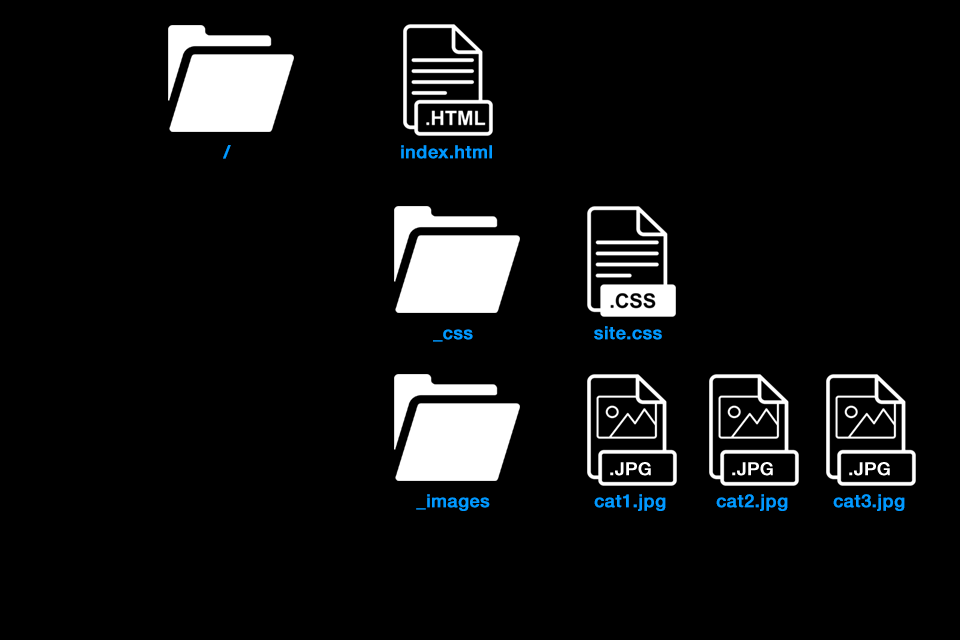
<style>
.page{position:relative;width:960px;height:640px;background:#000000}
.page>*{position:absolute;margin:0}
.t1{font:18px "HelveticaNeueLTStd-Md";letter-spacing:0.01em;color:#0099ff;font-weight:bold}
</style>
<div class="page">
<p class="t1" style="left:223px;top:145px;width:8px;height:14px">/</p>
<p class="t1" style="left:401px;top:145px;width:91px;height:14px">index.html</p>
<p class="t1" style="left:433px;top:329px;width:40px;height:13px">_css</p>
<p class="t1" style="left:594px;top:326px;width:68px;height:14px">site.css</p>
<p class="t1" style="left:416px;top:494px;width:74px;height:17px">_images</p>
<p class="t1" style="left:594px;top:494px;width:72px;height:17px">cat1.jpg</p>
<p class="t1" style="left:716px;top:494px;width:72px;height:17px">cat2.jpg</p>
<p class="t1" style="left:833px;top:494px;width:72px;height:17px">cat3.jpg</p>
</div>
